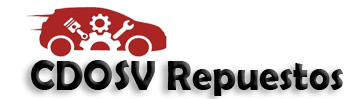
<style>
.page{position:relative;width:350px;height:99px;background:#ffffff}
.page>*{position:absolute;margin:0}
.t1{font:31.3px "BerlinSansFBDemi-Bold";color:#000000;scale:0.96 1}
</style>
<div class="page">
<p class="t1" style="left:31px;top:60px;width:312px;height:36px">CDOSV Repuestos</p>
</div>
